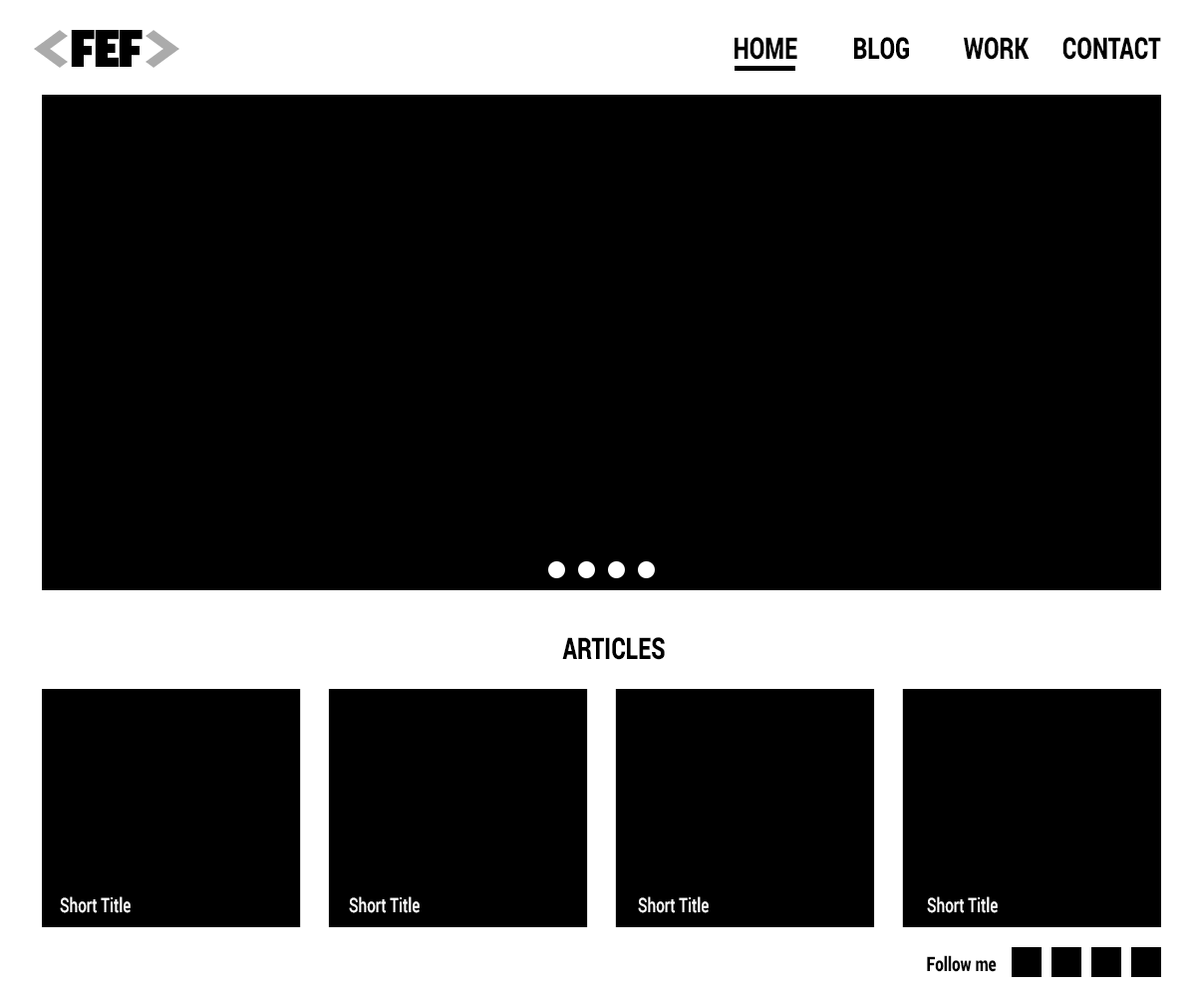
<style>
.page{position:relative;width:1196px;height:997px;background:#000000}
.page>*{position:absolute;margin:0}
.t1{font:49.7px "GillSans-UltraBold";letter-spacing:-0.06em;color:#000000;scale:0.75 1}
.t2{font:29.9px "Roboto-Black";color:#000000;scale:0.76 1}
.t3{font:19.9px "Roboto-Medium";color:#ffffff;scale:0.76 1}
.t4{font:19.9px "Roboto-Black";color:#000000;scale:0.76 1}
</style>
<div class="page">
<p class="t1" style="left:71px;top:30px;width:72px;height:37px">FEF</p>
<p class="t2" style="left:735px;top:37px;width:62px;height:23px">HOME</p>
<p class="t2" style="left:854px;top:37px;width:55px;height:23px">BLOG</p>
<p class="t2" style="left:963px;top:37px;width:67px;height:23px">WORK</p>
<p class="t2" style="left:1063px;top:37px;width:98px;height:23px">CONTACT</p>
<p class="t2" style="left:562px;top:637px;width:103px;height:23px">ARTICLES</p>
<p class="t3" style="left:60px;top:896px;width:71px;height:17px">Short Title</p>
<p class="t3" style="left:349px;top:896px;width:71px;height:17px">Short Title</p>
<p class="t3" style="left:638px;top:896px;width:71px;height:17px">Short Title</p>
<p class="t3" style="left:927px;top:896px;width:71px;height:17px">Short Title</p>
<p class="t4" style="left:927px;top:955px;width:70px;height:17px">Follow me</p>
</div>
